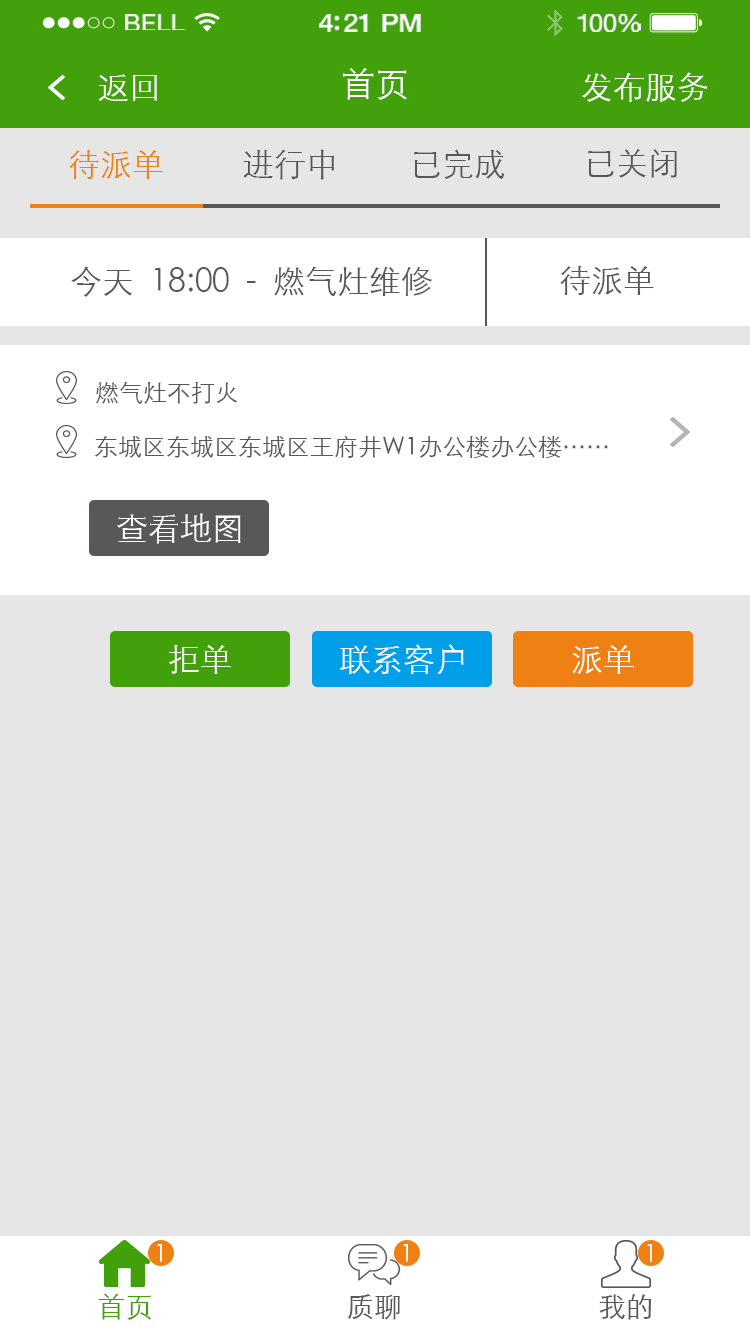
<style>
.page{position:relative;width:750px;height:1334px;background:#e6e6e6}
.page>*{position:absolute;margin:0}
.t1{font:23.3px "HelveticaNeue";letter-spacing:0.02em;color:#ffffff;scale:1.06 1}
.t2{font:25.3px "HelveticaNeue-Medium";letter-spacing:-0.02em;color:#ffffff;scale:1.06 1}
.t3{font:24.3px "HelveticaNeue";letter-spacing:-0.02em;color:#ffffff;scale:1.06 1}
.t4{font:32px "STXihei";color:#ffffff}
.t5{font:34px "STXihei";color:#ffffff}
.t6{font:32px "STXihei";color:#ef8013}
.t7{font:32px "STXihei";color:#595757}
.t8{font:24px "STXihei";color:#595757}
.t9{font:24px "STXihei";color:#ffffff}
.t10{font:28px "STXihei";color:#42a00a}
.t11{font:28px "STXihei";color:#595757}
</style>
<div class="page">
<p class="t1" style="left:125px;top:14px;width:61px;height:16px">BELL</p>
<p class="t2" style="left:319px;top:14px;width:102px;height:18px">4:21 PM</p>
<p class="t3" style="left:577px;top:14px;width:64px;height:18px">100%</p>
<p class="t4" style="left:98px;top:74px;width:59px;height:27px">返回</p>
<p class="t5" style="left:343px;top:68px;width:64px;height:32px">首页</p>
<p class="t4" style="left:582px;top:72px;width:126px;height:30px">发布服务</p>
<p class="t6" style="left:69px;top:150px;width:94px;height:29px">待派单</p>
<p class="t7" style="left:243px;top:149px;width:91px;height:31px">进行中</p>
<p class="t7" style="left:414px;top:149px;width:91px;height:30px">已完成</p>
<p class="t7" style="left:588px;top:149px;width:89px;height:29px">已关闭</p>
<p class="t7" style="left:71px;top:266px;width:361px;height:31px">今天  18:00  -  燃气灶维修</p>
<p class="t7" style="left:560px;top:266px;width:94px;height:29px">待派单</p>
<p class="t8" style="left:96px;top:381px;width:141px;height:23px">燃气灶不打火</p>
<p class="t8" style="left:95px;top:435px;width:513px;height:23px">东城区东城区东城区王府井W1办公楼办公楼……</p>
<p class="t4" style="left:117px;top:513px;width:124px;height:31px">查看地图</p>
<p class="t4" style="left:169px;top:644px;width:62px;height:30px">拒单</p>
<p class="t4" style="left:340px;top:644px;width:124px;height:31px">联系客户</p>
<p class="t4" style="left:572px;top:645px;width:62px;height:29px">派单</p>
<p class="t9" style="left:157px;top:1244px;width:5px;height:18px">1</p>
<p class="t9" style="left:403px;top:1244px;width:5px;height:18px">1</p>
<p class="t9" style="left:647px;top:1244px;width:5px;height:18px">1</p>
<p class="t10" style="left:98px;top:1293px;width:53px;height:27px">首页</p>
<p class="t11" style="left:348px;top:1294px;width:52px;height:26px">质聊</p>
<p class="t11" style="left:599px;top:1294px;width:53px;height:26px">我的</p>
</div>
